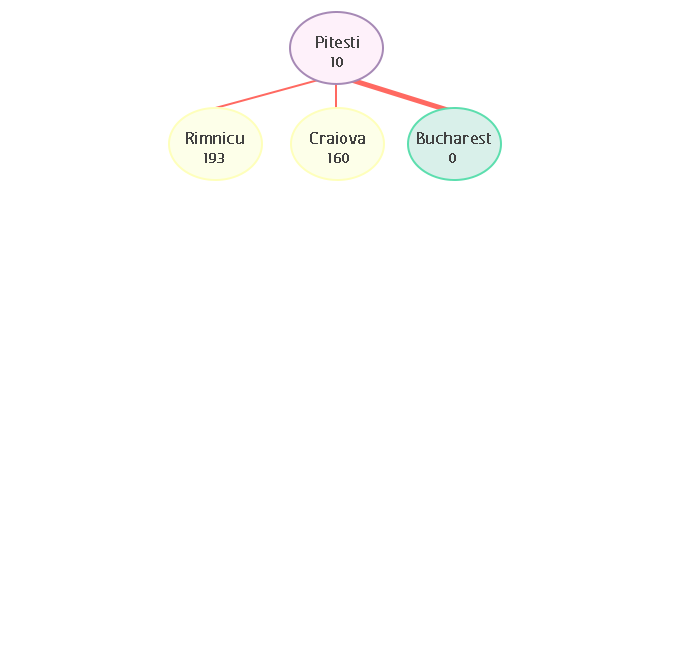
<style>
.page{position:relative;width:674px;height:660px;background:#ffffff}
.page>*{position:absolute;margin:0}
.t1{font:20.8px "FCActiveRegular";color:#424242;font-weight:bold}
.t2{font:16.7px "FCActiveRegular";color:#424141;font-weight:bold}
</style>
<div class="page">
<p class="t1" style="left:316px;top:36px;width:43px;height:12px">Pitesti</p>
<p class="t2" style="left:331px;top:57px;width:12px;height:10px">10</p>
<p class="t1" style="left:186px;top:132px;width:58px;height:12px">Rimnicu</p>
<p class="t1" style="left:310px;top:132px;width:55px;height:12px">Craiova</p>
<p class="t1" style="left:417px;top:132px;width:74px;height:12px">Bucharest</p>
<p class="t2" style="left:204px;top:153px;width:20px;height:10px">193</p>
<p class="t2" style="left:328px;top:153px;width:21px;height:10px">160</p>
<p class="t2" style="left:449px;top:153px;width:7px;height:10px">0</p>
</div>
